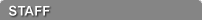
<style>
.page{position:relative;width:202px;height:20px;background:#858585}
.page>*{position:absolute;margin:0}
.t1{font:13.3px "Arial-BoldMT";color:#ffffff}
</style>
<div class="page">
<p class="t1" style="left:9px;top:5px;width:41px;height:11px">STAFF</p>
</div>
